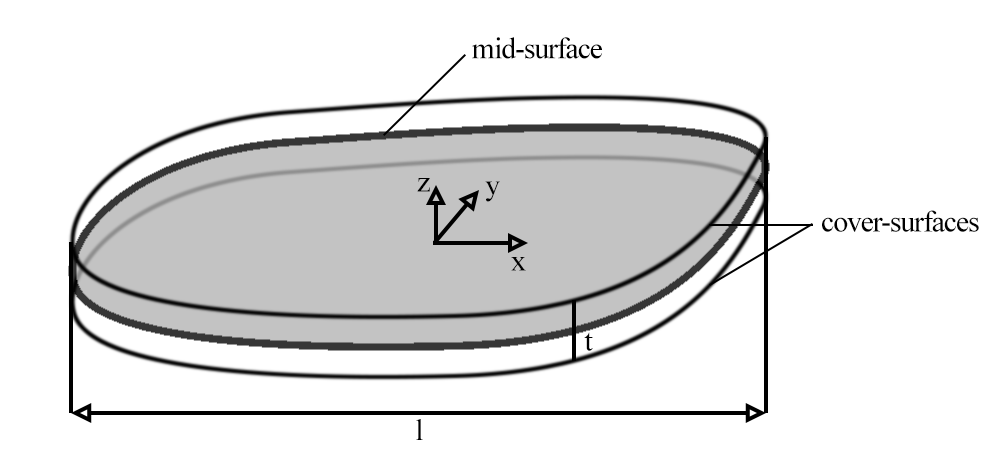
<style>
.page{position:relative;width:1000px;height:467px;background:#ffffff}
.page>*{position:absolute;margin:0}
.t1{font:30px "TimesNewRomanPSMT";letter-spacing:-0.04em;color:#000000}
.t2{font:30px "TimesNewRomanPSMT";color:#000000}
</style>
<div class="page">
<p class="t1" style="left:472px;top:37px;width:130px;height:22px">mid-surface</p>
<p class="t1" style="left:417px;top:178px;width:13px;height:14px">z</p>
<p class="t1" style="left:485px;top:181px;width:15px;height:21px">y</p>
<p class="t1" style="left:822px;top:210px;width:157px;height:22px">cover-surfaces</p>
<p class="t1" style="left:511px;top:257px;width:15px;height:14px">x</p>
<p class="t2" style="left:584px;top:332px;width:9px;height:19px">t</p>
<p class="t2" style="left:416px;top:419px;width:7px;height:21px">l</p>
</div>
